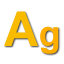
<style>
.page{position:relative;width:64px;height:64px;background:#ffffff}
.page>*{position:absolute;margin:0}
.t1{font:48px "Arial-BoldMT";color:#f8bb00}
.t2{font:36px "Arial-BoldMT";color:#ffae00}
</style>
<div class="page">
<p class="t1" style="left:4px;top:11px;width:55px;height:43px">A<span class="t2">g</span></p>
</div>
